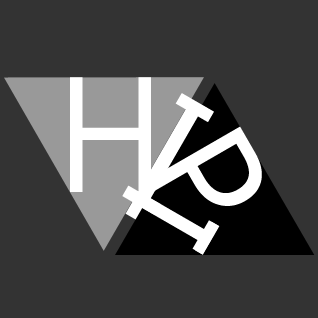
<style>
.page{position:relative;width:318px;height:318px;background:#333333}
.page>*{position:absolute;margin:0}
.t1{font:163.8px "Ebrima";color:#ffffff;scale:0.94 1}
.t2{font:169.5px "Ebrima";color:#ffffff}
.t3{font:156.3px "Ebrima";color:#ffffff}
.t4{font:122.7px "Ebrima";color:#ffffff;scale:1.23 1}
</style>
<div class="page">
<p class="t1" style="left:70px;top:77px;width:81px;height:115px">H</p>
<p class="t2" style="left:122px;top:93px;width:92px;height:122px;rotate:30deg">I</p>
<p class="t3" style="left:145px;top:126px;width:117px;height:80px;rotate:60deg">P</p>
<p class="t4" style="left:128px;top:183px;width:92px;height:72px;rotate:120deg">I</p>
</div>
